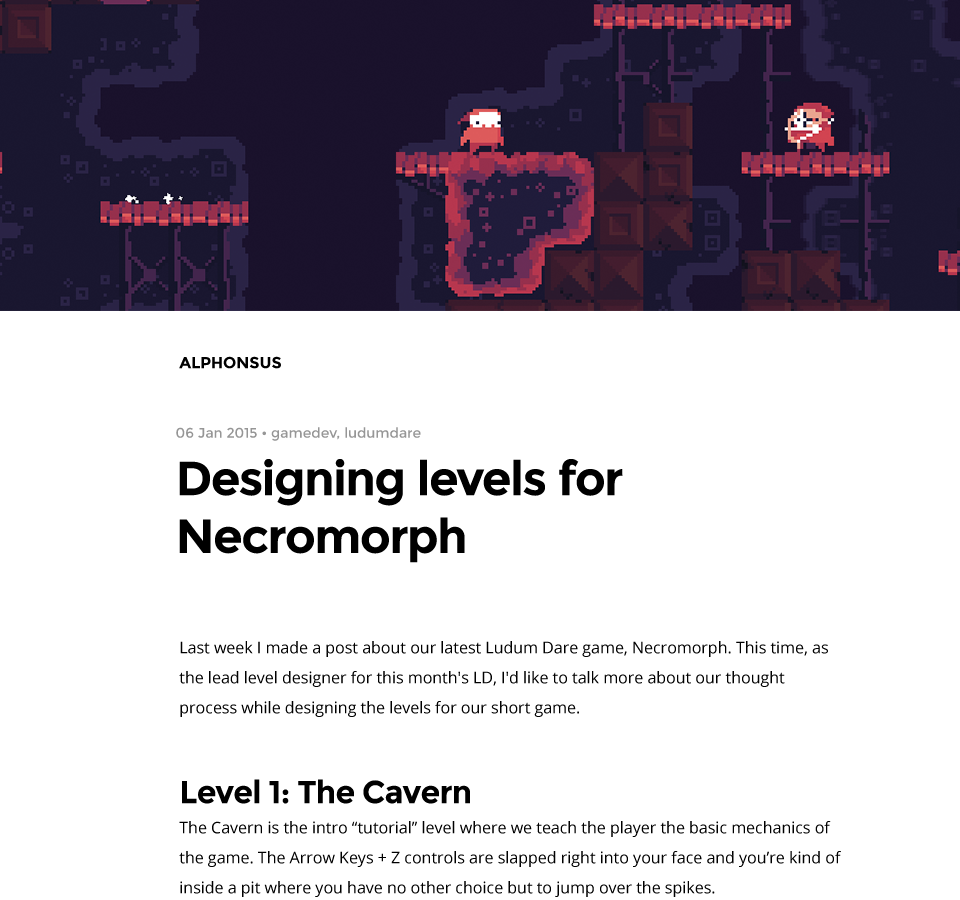
<style>
.page{position:relative;width:960px;height:900px;background:#ffffff}
.page>*{position:absolute;margin:0}
.t1{font:16px "Montserrat-Bold";color:#000000}
.t2{font:14px/29px "Montserrat-Regular";color:#969696}
.t3{font:48px "Montserrat-Bold";letter-spacing:-0.025em;color:#000000}
.t4{font:16px/30px "OpenSans";color:#000000}
.t5{font:32px/30px "Montserrat-Bold";letter-spacing:-0.025em;color:#000000}
</style>
<div class="page">
<p class="t1" style="left:179px;top:356px;width:102px;height:13px">ALPHONSUS</p>
<p class="t2" style="left:176px;top:427px;width:447px;height:136px">06 Jan 2015 • gamedev, ludumdare<br><span class="t3">Designing levels for<br>Necromorph</span></p>
<p class="t4" style="left:179px;top:641px;width:662px;height:256px">Last week I made a post about our latest Ludum Dare game, Necromorph. This time, as the lead level designer for this month's LD, I'd like to talk more about our thought process while designing the levels for our short game.<br><br><br><span class="t5">Level 1: The Cavern<br></span>The Cavern is the intro “tutorial” level where we teach the player the basic mechanics of the game. The Arrow Keys + Z controls are slapped right into your face and you’re kind of inside a pit where you have no other choice but to jump over the spikes.</p>
</div>
